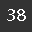
<style>
.page{position:relative;width:32px;height:32px;background:#333333}
.page>*{position:absolute;margin:0}
.t1{font:17.8px "MyriadPro-Regular";color:#ffffff;scale:1.12 1}
</style>
<div class="page">
<p class="t1" style="left:7px;top:9px;width:19px;height:12px">38</p>
</div>
